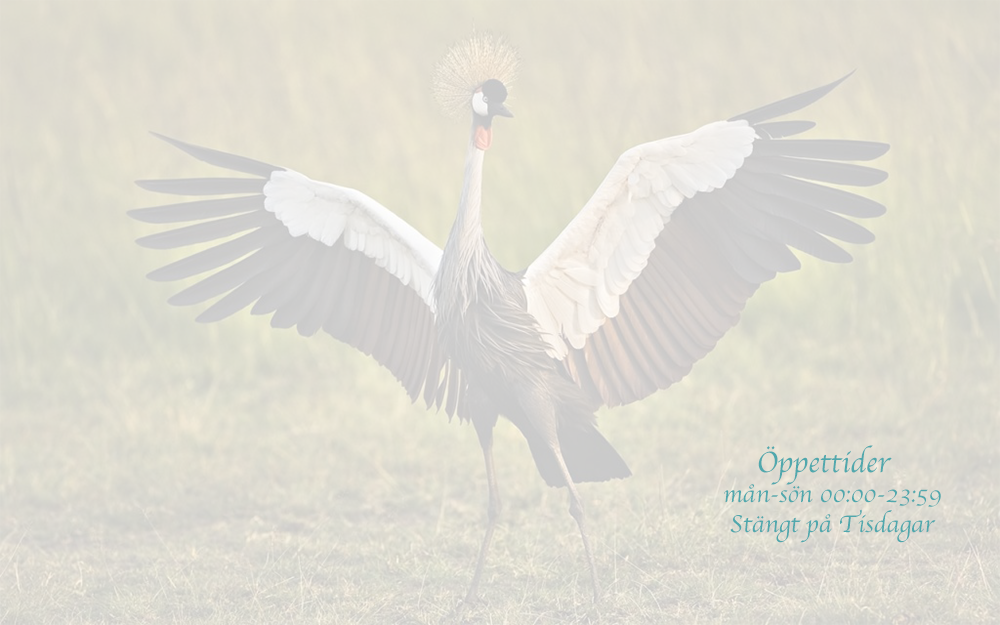
<style>
.page{position:relative;width:1000px;height:625px}
.page>*{position:absolute;margin:0}
.t1{font:25px "Apple-Chancery";color:#50a8ad}
.t2{font:30.6px "Apple-Chancery";color:#50a8ad}
</style>
<div class="page">
<p class="t1" style="left:724px;top:445px;width:217px;height:98px"><span class="t2">   <br>    Öppettider <br></span>mån-sön 00:00-23:59<br> Stängt på Tisdagar</p>
</div>
